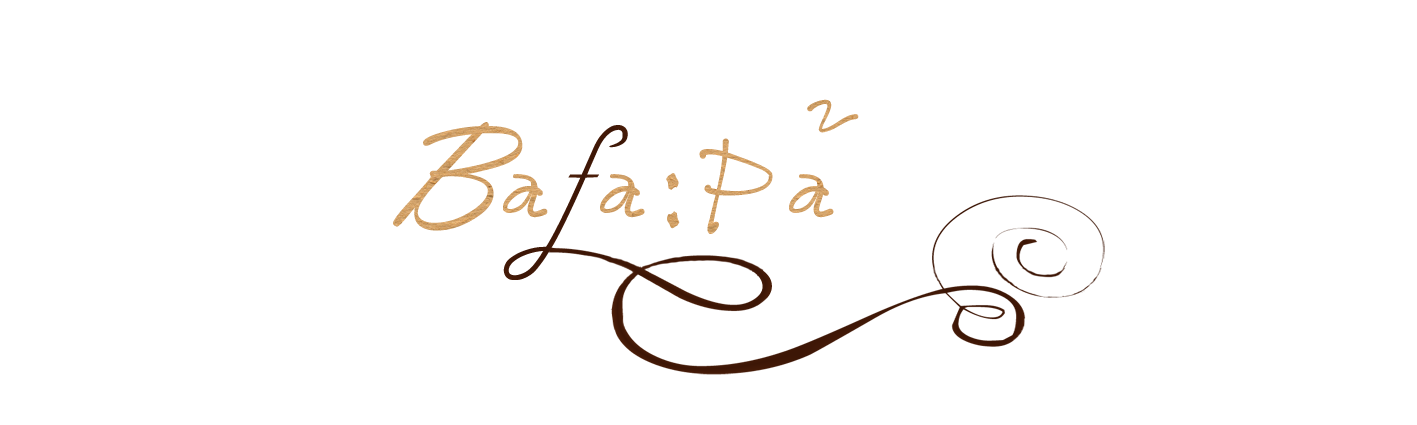
<style>
.page{position:relative;width:1417px;height:425px;background:#ffffff}
.page>*{position:absolute;margin:0}
.t1{font:150px "kg_lecture";color:#d2a167}
.t2{font:150px "VladimirScript";color:#d2a167}
.t3{font:150px "TempusSansITC";color:#d2a167}
</style>
<div class="page">
<p class="t1" style="left:393px;top:99px;width:466px;height:135px"><span class="t2">B</span>a a<span class="t3">:</span>Pa้</p>
</div>
